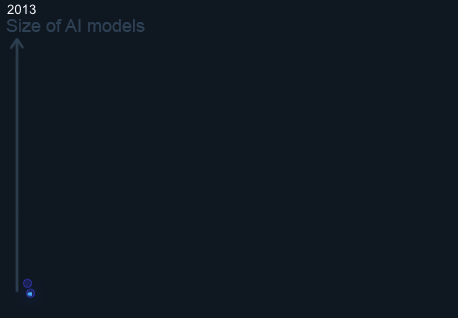
<style>
.page{position:relative;width:458px;height:318px;background:#0f1720}
.page>*{position:absolute;margin:0}
.t1{font:18px "ArialMT";color:#2e4054}
</style>
<div class="page">
<p class="t1" style="left:6px;top:19px;width:139px;height:13px">Size of AI models</p>
</div>
